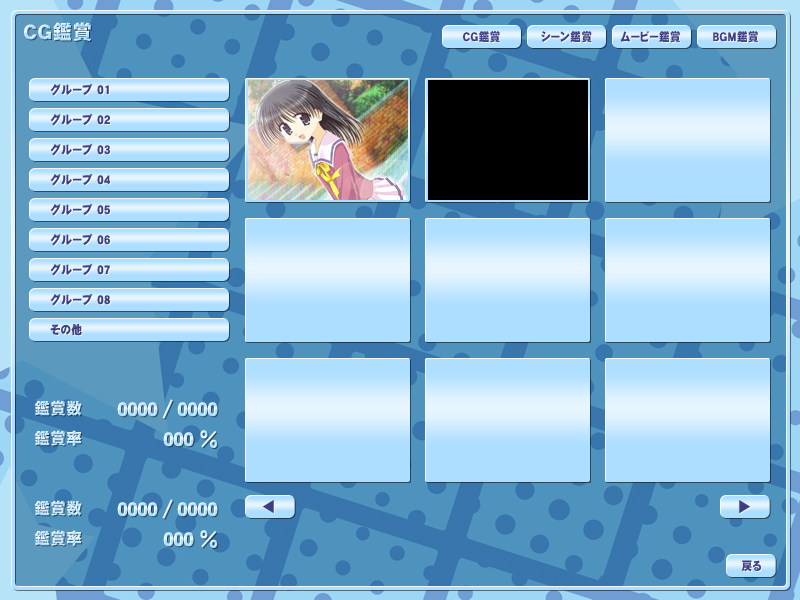
<style>
.page{position:relative;width:800px;height:600px}
.page>*{position:absolute;margin:0}
.t1{font:20px "DFGothic-EB-WING-RKSJ-H";letter-spacing:0.05em;scale:0.95 1}
.t2{font:12px "DFGothic-EB-WING-RKSJ-H";letter-spacing:0.05em;color:#404080;scale:0.87 1}
.t3{font:12px "DFGothic-EB-WING-RKSJ-H";letter-spacing:0.05em;color:#404080;scale:0.9 1}
.t4{font:16px "DFGothic-EB-WING-RKSJ-H";letter-spacing:0.05em;scale:0.95 1}
.t5{font:22px "DFGothic-EB-WING-RKSJ-H";letter-spacing:0.05em;color:#e7f5ff;scale:0.95 1}
.t6{font:22px "DFGothic-EB-WING-RKSJ-H";letter-spacing:0.05em;scale:0.9 1}
.t7{font:14.4px "DFGothic-EB-WING-RKSJ-H";letter-spacing:0.025em;color:#404080;scale:1.06 1}
</style>
<div class="page">
<p class="t1" style="left:24px;top:22px;width:67px;height:19px">ＣＧ鑑賞</p>
<p class="t2" style="left:463px;top:31px;width:37px;height:12px">ＣＧ鑑賞</p>
<p class="t2" style="left:541px;top:31px;width:51px;height:12px">シーン鑑賞</p>
<p class="t2" style="left:620px;top:31px;width:60px;height:12px">ムービー鑑賞</p>
<p class="t2" style="left:713px;top:31px;width:45px;height:12px">ＢＧＭ鑑賞</p>
<p class="t3" style="left:50px;top:83px;width:59px;height:13px">グループ 01</p>
<p class="t3" style="left:50px;top:113px;width:60px;height:13px">グループ 02</p>
<p class="t3" style="left:50px;top:143px;width:60px;height:13px">グループ 03</p>
<p class="t3" style="left:50px;top:173px;width:60px;height:13px">グループ 04</p>
<p class="t3" style="left:50px;top:203px;width:60px;height:13px">グループ 05</p>
<p class="t3" style="left:50px;top:233px;width:60px;height:13px">グループ 06</p>
<p class="t3" style="left:50px;top:263px;width:60px;height:13px">グループ 07</p>
<p class="t3" style="left:50px;top:293px;width:60px;height:13px">グループ 08</p>
<p class="t3" style="left:50px;top:324px;width:32px;height:12px">その他</p>
<p class="t4" style="left:34px;top:400px;width:48px;height:16px">鑑賞数</p>
<p class="t5" style="left:162px;top:399px;width:11px;height:20px">/</p>
<p class="t4" style="left:34px;top:430px;width:48px;height:16px">鑑賞率</p>
<p class="t6" style="left:200px;top:430px;width:18px;height:18px">%</p>
<p class="t4" style="left:34px;top:500px;width:48px;height:16px">鑑賞数</p>
<p class="t5" style="left:162px;top:499px;width:11px;height:20px">/</p>
<p class="t7" style="left:262px;top:500px;width:12px;height:14px;rotate:90deg">▼</p>
<p class="t7" style="left:739px;top:500px;width:12px;height:14px;rotate:-90deg">▼</p>
<p class="t4" style="left:34px;top:530px;width:48px;height:16px">鑑賞率</p>
<p class="t6" style="left:200px;top:530px;width:18px;height:18px">%</p>
<p class="t2" style="left:741px;top:560px;width:20px;height:12px">戻る</p>
</div>
